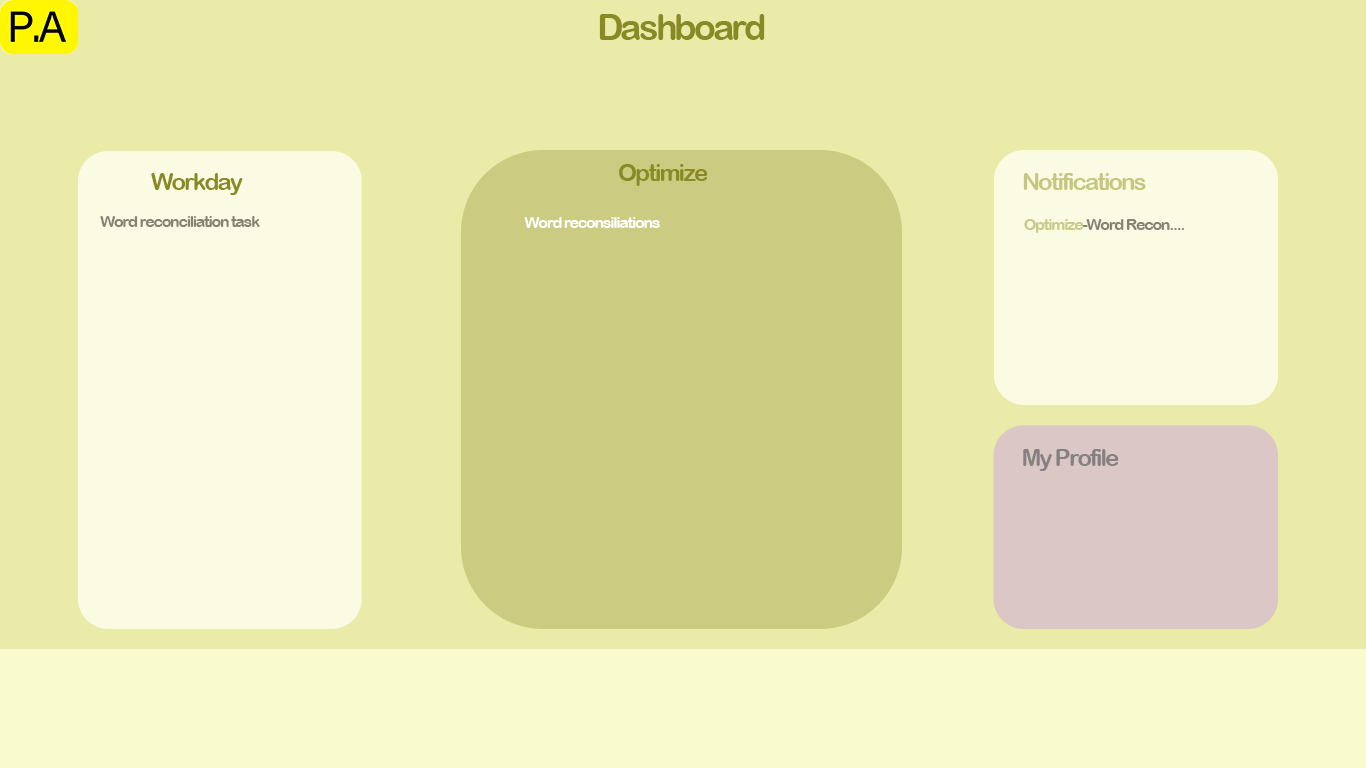
<style>
.page{position:relative;width:1366px;height:768px;background:#eaeba9}
.page>*{position:absolute;margin:0}
.t1{font:36px "ArialRoundedMTBold";letter-spacing:-0.08em;color:#888a23}
.t2{font:24px "ArialRoundedMTBold";letter-spacing:-0.08em;color:#888a23}
.t3{font:24px "ArialRoundedMTBold";letter-spacing:-0.08em;color:#c6c680}
.t4{font:16px "ArialRoundedMTBold";letter-spacing:-0.08em;color:#848474}
.t5{font:16px "ArialRoundedMTBold";letter-spacing:-0.08em;color:#ffffff}
.t6{font:16px "ArialRoundedMTBold";letter-spacing:-0.08em;color:#caca89}
.t7{font:24px "ArialRoundedMTBold";letter-spacing:-0.08em;color:#868181}
</style>
<div class="page">
<p class="t1" style="left:599px;top:14px;width:166px;height:26px">Dashboard</p>
<p class="t2" style="left:151px;top:173px;width:92px;height:22px">Workday</p>
<p class="t2" style="left:619px;top:164px;width:89px;height:22px">Optimize</p>
<p class="t3" style="left:1023px;top:173px;width:123px;height:17px">Notifications</p>
<p class="t4" style="left:100px;top:216px;width:160px;height:11px">Word reconciliation task</p>
<p class="t5" style="left:524px;top:217px;width:136px;height:11px">Word reconsiliations</p>
<p class="t4" style="left:1024px;top:219px;width:161px;height:14px"><span class="t6">Optimize</span>-Word Recon....</p>
<p class="t7" style="left:1023px;top:449px;width:96px;height:22px">My Profile</p>
</div>
